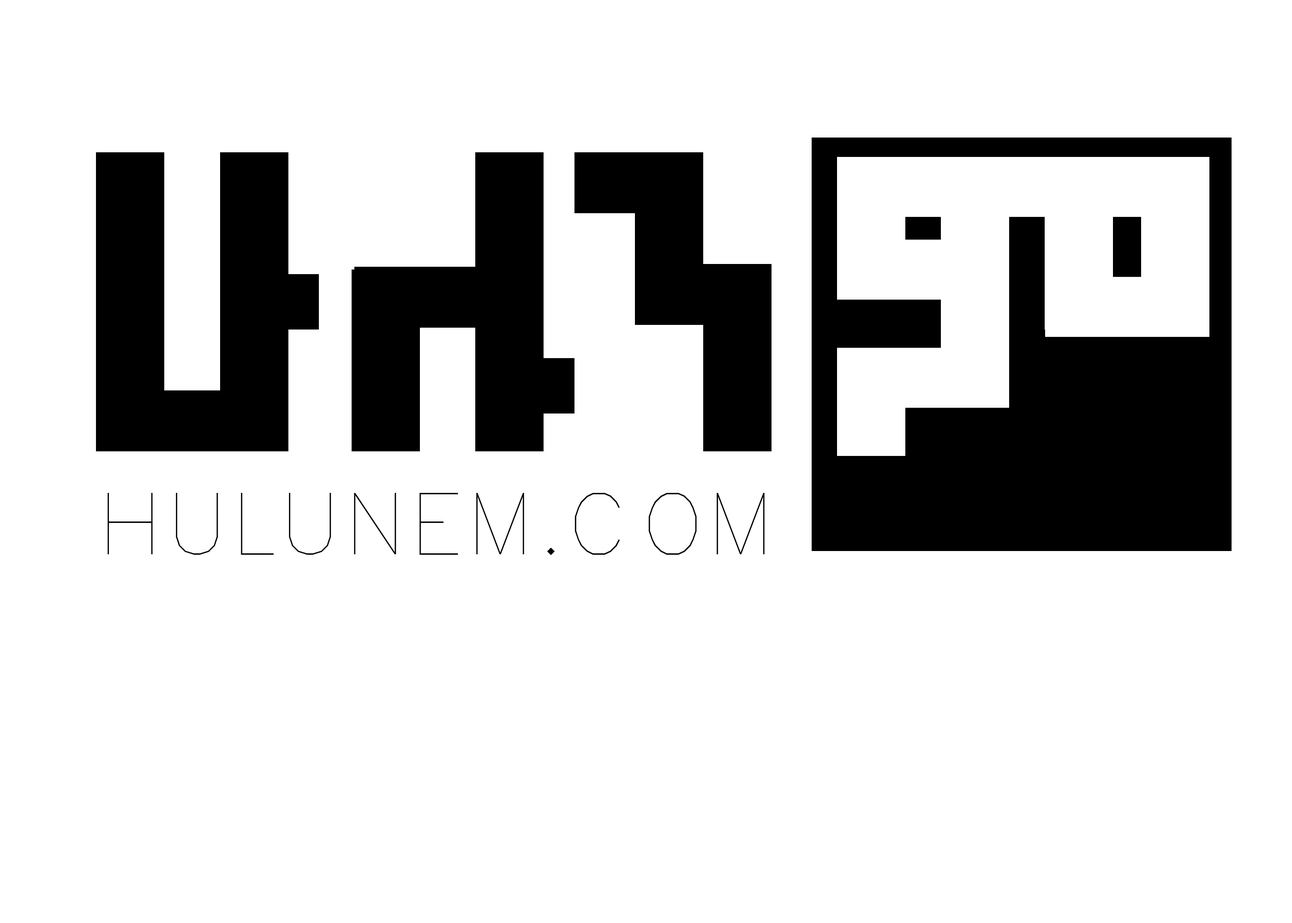
<style>
.page{position:relative;width:1292px;height:923px;background:#ffffff}
.page>*{position:absolute;margin:0}
.t1{font:83.1px "GDT";color:#000000}
</style>
<div class="page">
<p class="t1" style="left:108px;top:493px;width:657px;height:62px">HULUNEM.COM</p>
</div>
